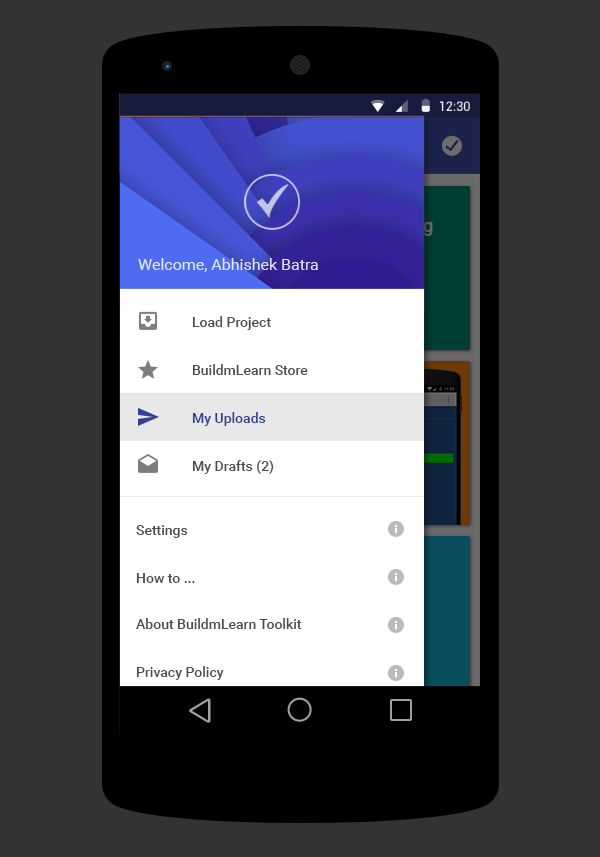
<style>
.page{position:relative;width:600px;height:857px;background:#333333}
.page>*{position:absolute;margin:0}
.t1{font:12.7px "Roboto-Regular";color:#ffffff}
.t2{font:16px "Roboto-Regular";color:#e3e7fc}
.t3{font:14px "Roboto-Medium";color:#4d4d4d}
.t4{font:14px "Roboto-Medium"}
.t5{font:14px "Roboto-Medium";color:#324191}
</style>
<div class="page">
<p class="t1" style="left:440px;top:101px;width:30px;height:10px">12:30</p>
<p class="t2" style="left:138px;top:258px;width:180px;height:14px">Welcome, Abhishek Batra</p>
<p class="t3" style="left:192px;top:316px;width:79px;height:14px">Load Project</p>
<p class="t4" style="left:193px;top:315px;width:79px;height:14px">Load Project</p>
<p class="t3" style="left:192px;top:364px;width:116px;height:11px">BuildmLearn Store</p>
<p class="t4" style="left:193px;top:363px;width:115px;height:11px">BuildmLearn Store</p>
<p class="t5" style="left:192px;top:412px;width:74px;height:14px">My Uploads</p>
<p class="t4" style="left:193px;top:411px;width:73px;height:14px">My Uploads</p>
<p class="t3" style="left:192px;top:460px;width:82px;height:14px">My Drafts (2)</p>
<p class="t3" style="left:136px;top:525px;width:52px;height:13px">Settings</p>
<p class="t4" style="left:137px;top:524px;width:51px;height:13px">Settings</p>
<p class="t3" style="left:136px;top:573px;width:59px;height:10px">How to ...</p>
<p class="t3" style="left:136px;top:618px;width:166px;height:11px">About BuildmLearn Toolkit</p>
<p class="t3" style="left:136px;top:666px;width:88px;height:14px">Privacy Policy</p>
</div>
